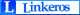
<style>
.page{position:relative;width:80px;height:15px;background:#ffffff}
.page>*{position:absolute;margin:0}
.t1{font:14px "PiratesBay";color:#005afe}
</style>
<div class="page">
<p class="t1" style="left:22px;top:1px;width:48px;height:12px">Linkeros</p>
</div>
